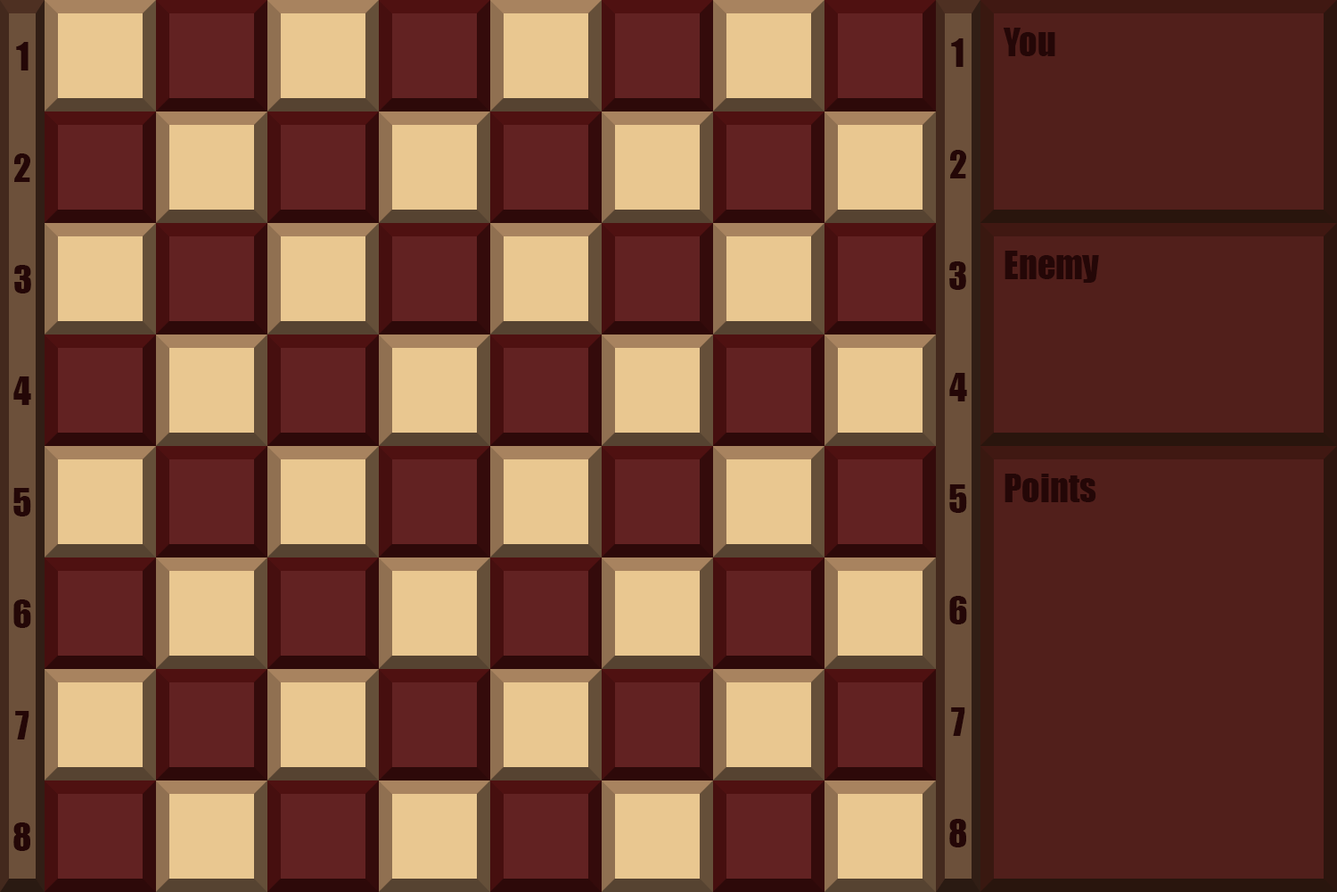
<style>
.page{position:relative;width:1337px;height:892px;background:#511f1b}
.page>*{position:absolute;margin:0}
.t1{font:36.7px/111.5px "Impact";color:#240707}
</style>
<div class="page">
<p class="t1" style="left:1003px;top:28px;width:96px;height:474px">You<br><br>Enemy<br><br>Points</p>
<p class="t1" style="left:13px;top:42px;width:18px;height:809px;text-align:center">1<br>2<br>3<br>4<br>5<br>6<br>7<br>8</p>
<p class="t1" style="left:950px;top:38px;width:17px;height:809px;text-align:center">1<br>2<br>3<br>4<br>5<br>6<br>7<br>8</p>
</div>
